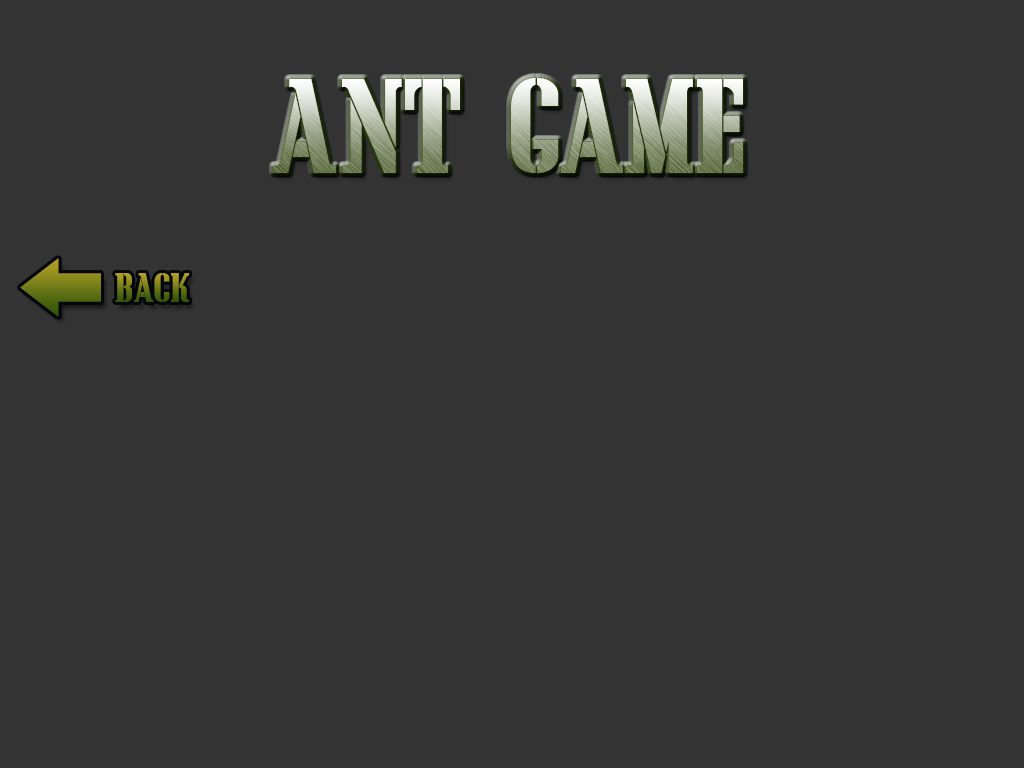
<style>
.page{position:relative;width:1024px;height:768px;background:#333333}
.page>*{position:absolute;margin:0}
.t1{font:96px "CargoCrate"}
.t2{font:30px "CargoCrate"}
</style>
<div class="page">
<p class="t1" style="left:274px;top:78px;width:469px;height:95px">Ant Game</p>
<p class="t2" style="left:115px;top:273px;width:74px;height:29px">Back</p>
<p class="t2" style="left:115px;top:273px;width:74px;height:29px">Back</p>
</div>
